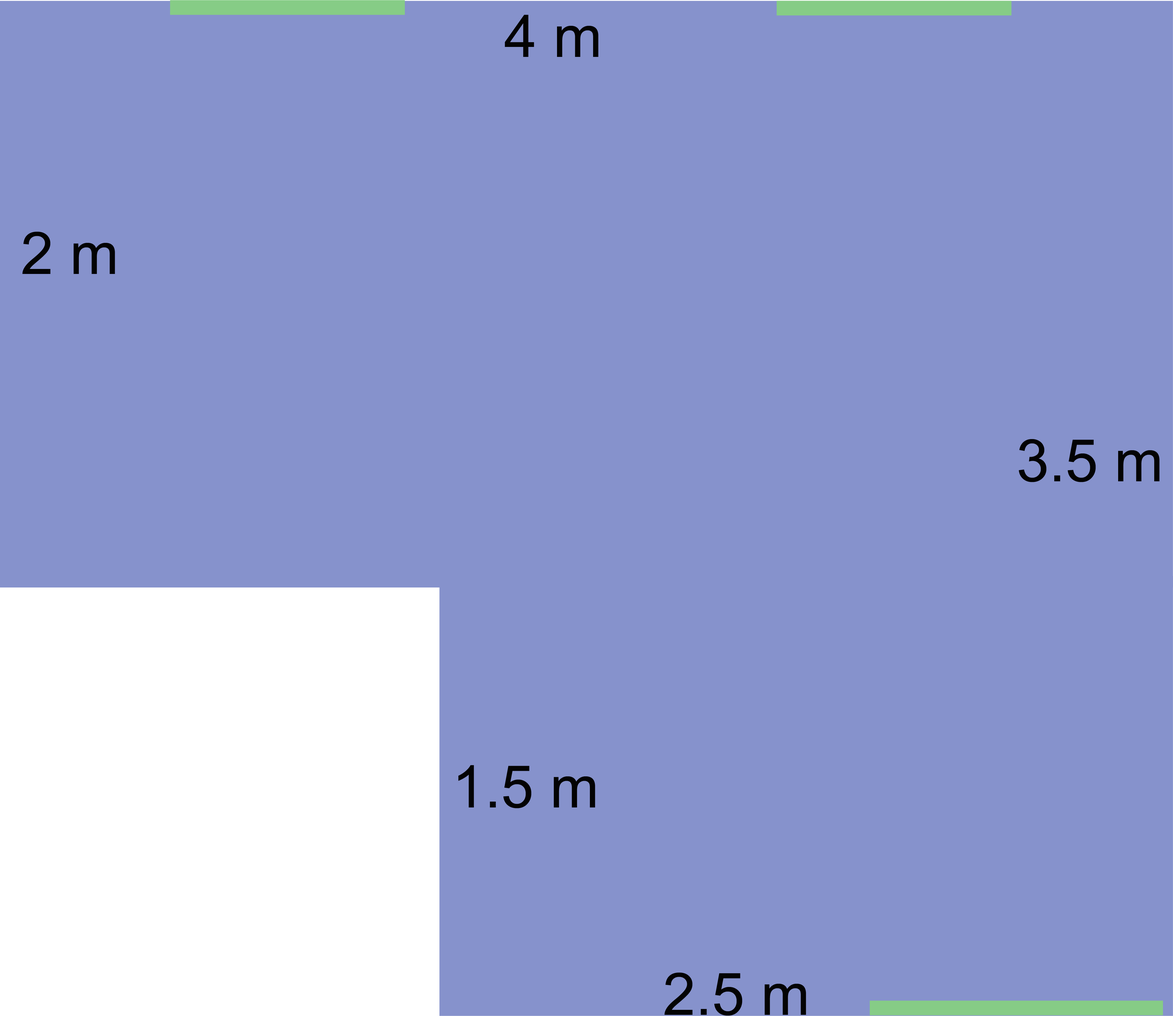
<style>
.page{position:relative;width:1173px;height:1016px;background:#8692cc}
.page>*{position:absolute;margin:0}
.t1{font:58.7px "ArialMT";color:#030303}
</style>
<div class="page">
<p class="t1" style="left:505px;top:15px;width:94px;height:42px">4 m</p>
<p class="t1" style="left:22px;top:231px;width:93px;height:43px">2 m</p>
<p class="t1" style="left:1019px;top:439px;width:141px;height:43px">3.5 m</p>
<p class="t1" style="left:458px;top:765px;width:137px;height:44px">1.5 m</p>
<p class="t1" style="left:665px;top:973px;width:141px;height:43px">2.5 m</p>
</div>
